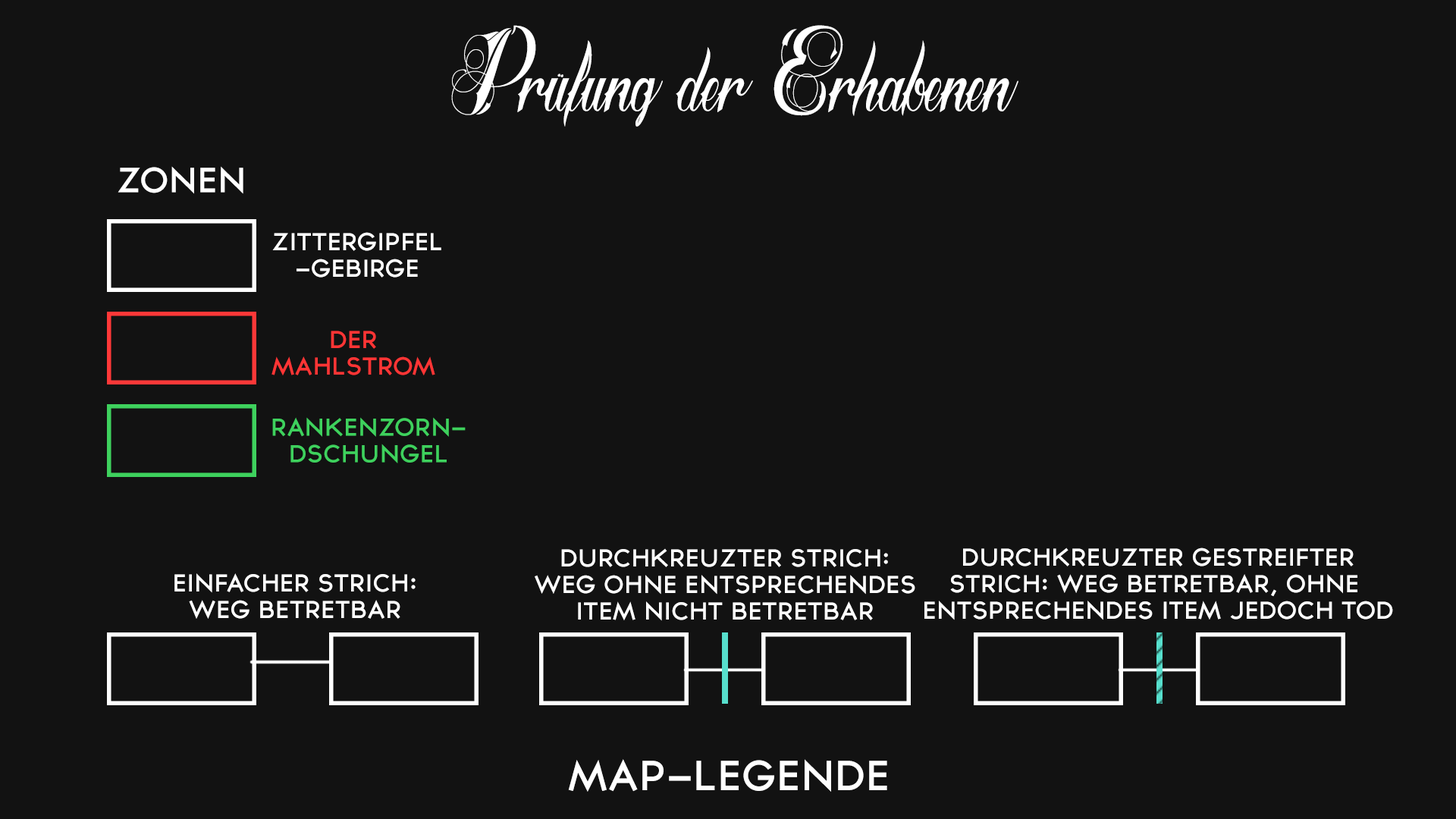
<style>
.page{position:relative;width:1456px;height:819px;background:#121212}
.page>*{position:absolute;margin:0}
.t1{font:123.3px "RadicalBeat";color:#ffffff}
.t2{font:31.6px "TYPOGRAPHPRO-SemiBold";color:#ffffff}
.t3{font:22.1px "TYPOGRAPHPRO-SemiBold";color:#ffffff}
.t4{font:22.1px "TYPOGRAPHPRO-SemiBold";color:#ff3535}
.t5{font:22.1px "TYPOGRAPHPRO-SemiBold";color:#3ed15d}
.t6{font:37.9px "TYPOGRAPHPRO-SemiBold";color:#ffffff}
</style>
<div class="page">
<p class="t1" style="left:451px;top:25px;width:567px;height:102px">Prüfung der Erhabenen</p>
<p class="t2" style="left:118px;top:166px;width:125px;height:28px">ZONEN</p>
<p class="t3" style="left:272px;top:232px;width:169px;height:46px;text-align:center">ZITTERGIPFEL<br>-GEBIRGE</p>
<p class="t4" style="left:271px;top:331px;width:164px;height:44px;text-align:center">DER<br>MAHLSTROM</p>
<p class="t5" style="left:272px;top:417px;width:194px;height:46px;text-align:center">RANKENZORN-<br>DSCHUNGEL</p>
<p class="t3" style="left:535px;top:548px;width:380px;height:73px;text-align:center">DURCHKREUZTER STRICH:<br>WEG OHNE ENTSPRECHENDES<br>ITEM NICHT BETRETBAR</p>
<p class="t3" style="left:924px;top:548px;width:469px;height:72px;text-align:center">DURCHKREUZTER GESTREIFTER<br>STRICH: WEG BETRETBAR, OHNE <br>ENTSPRECHENDES ITEM JEDOCH TOD</p>
<p class="t3" style="left:174px;top:573px;width:242px;height:46px;text-align:center">EINFACHER STRICH:<br>WEG BETRETBAR</p>
<p class="t6" style="left:568px;top:759px;width:319px;height:33px">MAP-LEGENDE</p>
</div>
